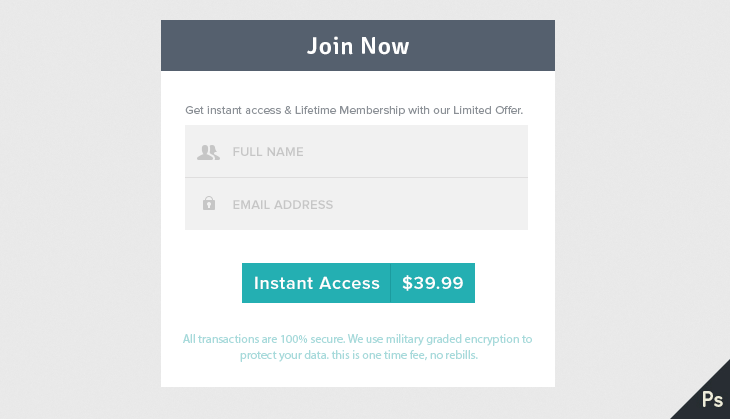
<style>
.page{position:relative;width:730px;height:419px;background:#e9e9e9}
.page>*{position:absolute;margin:0}
.t1{font:24px "Signika-Semibold";letter-spacing:0.04em;color:#ffffff}
.t2{font:12px "ProximaNova-Regular";color:#8c9197}
.t3{font:13px "ProximaNova-Semibold";letter-spacing:0.013em;color:#c6c6c6;text-transform:uppercase}
.t4{font:18px "ProximaNova-Semibold";letter-spacing:0.04em;color:#ffffff}
.t5{font:12px/16px "MyriadPro-Regular";color:#a7dadb}
</style>
<div class="page">
<p class="t1" style="left:307px;top:36px;width:102px;height:19px">Join Now</p>
<p class="t2" style="left:185px;top:106px;width:338px;height:10px">Get instant access &amp; Lifetime Membership with our Limited Offer.</p>
<p class="t3" style="left:233px;top:147px;width:70px;height:9px">FULL NAME</p>
<p class="t3" style="left:233px;top:200px;width:100px;height:9px">EMAIL ADDRESS</p>
<p class="t4" style="left:255px;top:275px;width:208px;height:16px">Instant Access    $39.99</p>
<p class="t5" style="left:183px;top:334px;width:349px;height:28px;text-align:center">All transactions are 100% secure. We use military graded encryption to<br> protect your data. this is one time fee, no rebills.</p>
</div>
